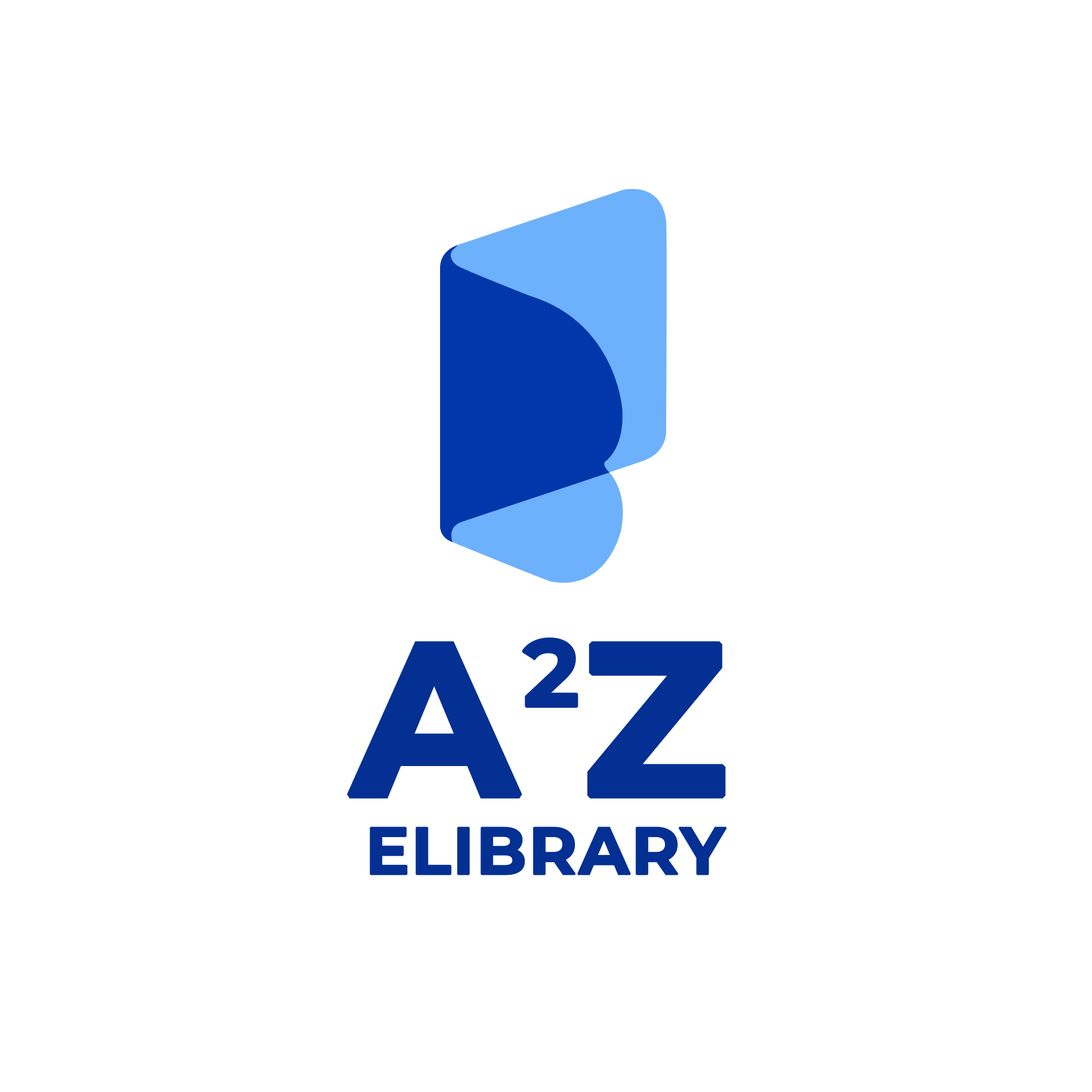
<style>
.page{position:relative;width:1092px;height:1092px;background:#ffffff}
.page>*{position:absolute;margin:0}
.t1{font:216.1px "Montserrat-Bold";color:#033092;text-transform:uppercase;font-weight:bold}
.t2{font:163.8px "Montserrat-Bold";color:#033092;text-transform:uppercase;font-weight:bold}
.t3{font:66px "Montserrat-Bold";color:#033092;text-transform:uppercase;font-weight:bold}
</style>
<div class="page">
<p class="t1" style="left:347px;top:637px;width:379px;height:162px">a<span class="t2">2</span>z</p>
<p class="t3" style="left:370px;top:827px;width:357px;height:48px">elibrary</p>
</div>
